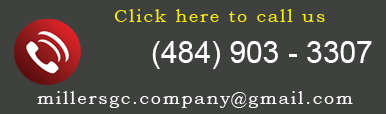
<style>
.page{position:relative;width:386px;height:114px;background:#3f413f}
.page>*{position:absolute;margin:0}
.t1{font:18px "BookmanOldStyle";letter-spacing:0.1em;color:#f9ec07}
.t2{font:30px "ArialMT";color:#ffffff}
.t3{font:18px "BookmanOldStyle";letter-spacing:0.1em;color:#ffffff}
</style>
<div class="page">
<p class="t1" style="left:114px;top:9px;width:211px;height:13px">Click here to call us</p>
<p class="t2" style="left:152px;top:41px;width:220px;height:28px">(484) 903 - 3307</p>
<p class="t3" style="left:37px;top:91px;width:316px;height:17px">millersgc.company@gmail.com</p>
</div>
